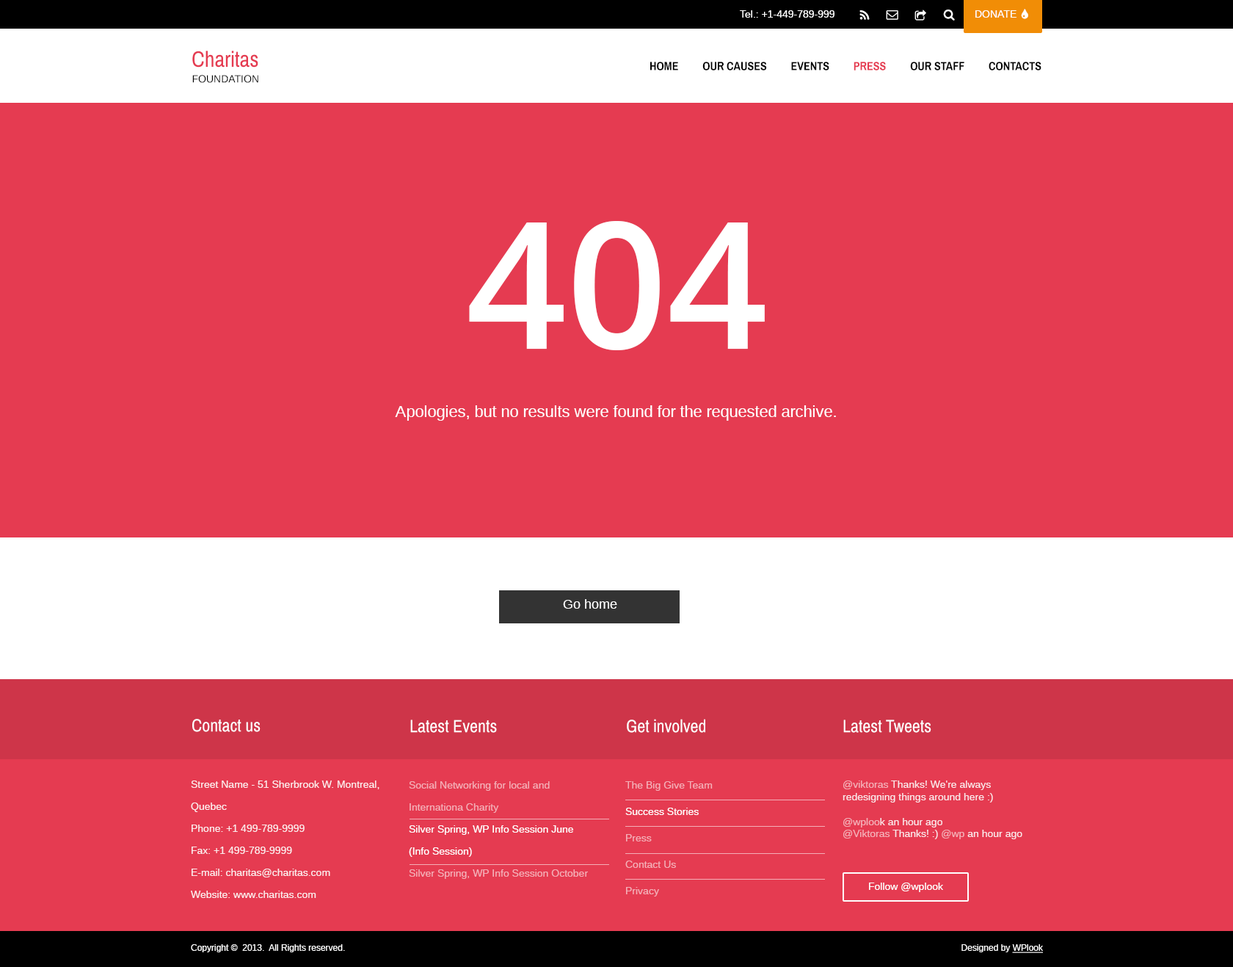
<style>
.page{position:relative;width:1233px;height:967px;background:#e53b51}
.page>*{position:absolute;margin:0}
.t1{font:10.3px "Arimo";color:#ffffff}
.t2{font:22px "ArchivoNarrow-Regular";color:#e53b51}
.t3{font:11.7px "ArchivoNarrow-Bold";color:#000000;text-transform:uppercase}
.t4{font:11.7px "ArchivoNarrow-Bold";color:#e53b51;text-transform:uppercase}
.t5{font:10.3px "Arimo";color:#000000}
.t6{font:176.2px "OpenSans-Semibold";color:#ffffff;text-transform:uppercase}
.t7{font:16.2px "Arimo";color:#ffffff}
.t8{font:13.2px "Arimo";color:#ffffff}
.t9{font:17.6px "ArchivoNarrow-Regular";color:#ffffff}
.t10{font:10.3px/22px "Arimo";color:#fceced}
.t11{font:10.3px/22px "Arimo";color:#f4aeb7}
.t12{font:10.3px/22px "Arimo";color:#ffffff}
.t13{font:10.3px/26.4px "Arimo";color:#f4aeb7}
.t14{font:10.3px/26.4px "Arimo";color:#ffffff}
.t15{font:10.3px "Arimo";color:#fae6e9}
.t16{font:10.3px "Arimo";color:#f4aeb7}
.t17{font:8.8px "Arimo";color:#f9f9f9}
.t18{font:8.8px "Arimo";color:#f9f9f9;text-decoration:underline}
</style>
<div class="page">
<p class="t1" style="left:740px;top:10px;width:95px;height:8px">Tel.: +1-449-789-999</p>
<p class="t1" style="left:976px;top:10px;width:41px;height:8px">DONATE</p>
<p class="t2" style="left:192px;top:51px;width:66px;height:17px">Charitas</p>
<p class="t3" style="left:650px;top:62px;width:392px;height:8px">Home         Our Causes         Events         <span class="t4">PRESS         </span>Our Staff         Contacts</p>
<p class="t5" style="left:192px;top:75px;width:66px;height:8px">FOUNDATION</p>
<p class="t6" style="left:469px;top:221px;width:296px;height:129px">404</p>
<p class="t7" style="left:395px;top:405px;width:441px;height:16px">Apologies, but no results were found for the requested archive.</p>
<p class="t8" style="left:563px;top:599px;width:54px;height:10px">Go home</p>
<p class="t9" style="left:192px;top:719px;width:69px;height:13px">Contact us</p>
<p class="t9" style="left:410px;top:719px;width:87px;height:14px">Latest Events</p>
<p class="t9" style="left:627px;top:719px;width:78px;height:14px">Get involved</p>
<p class="t9" style="left:844px;top:719px;width:88px;height:14px">Latest Tweets</p>
<p class="t10" style="left:191px;top:780px;width:189px;height:118px">Street Name - 51 Sherbrook W. Montreal, Quebec<br>Phone: +1 499-789-9999<br>Fax: +1 499-789-9999<br>E-mail: charitas@charitas.com<br>Website: www.charitas.com</p>
<p class="t11" style="left:409px;top:781px;width:179px;height:98px">Social Networking for local and  Internationa Charity<br><span class="t12">Silver Spring, WP Info Session June (Info Session)<br></span>Silver Spring, WP Info Session October</p>
<p class="t13" style="left:625px;top:781px;width:88px;height:115px">The Big Give Team<br><span class="t14">Success Stories<br></span>Press<br>Contact Us<br>Privacy<br>Legal</p>
<p class="t15" style="left:843px;top:780px;width:180px;height:59px"><span class="t16">@viktoras</span> Thanks! We're always redesigning things around here :) <br><br><span class="t16">@wploo</span>k an hour ago<br><span class="t16">@Viktoras </span>Thanks! :) <span class="t16">@wp</span> an hour ago</p>
<p class="t1" style="left:869px;top:882px;width:74px;height:10px">Follow @wplook</p>
<p class="t17" style="left:191px;top:944px;width:154px;height:8px">Copyright ©  2013.  All Rights reserved.</p>
<p class="t17" style="left:962px;top:944px;width:81px;height:9px">Designed by <span class="t18">WPlook</span></p>
</div>
